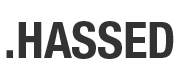
<style>
.page{position:relative;width:180px;height:80px;background:#ffffff}
.page>*{position:absolute;margin:0}
.t1{font:50px "HelveticaNeueLTPro-BdCn";color:#333333}
</style>
<div class="page">
<p class="t1" style="left:6px;top:21px;width:168px;height:38px">.HASSED</p>
</div>
